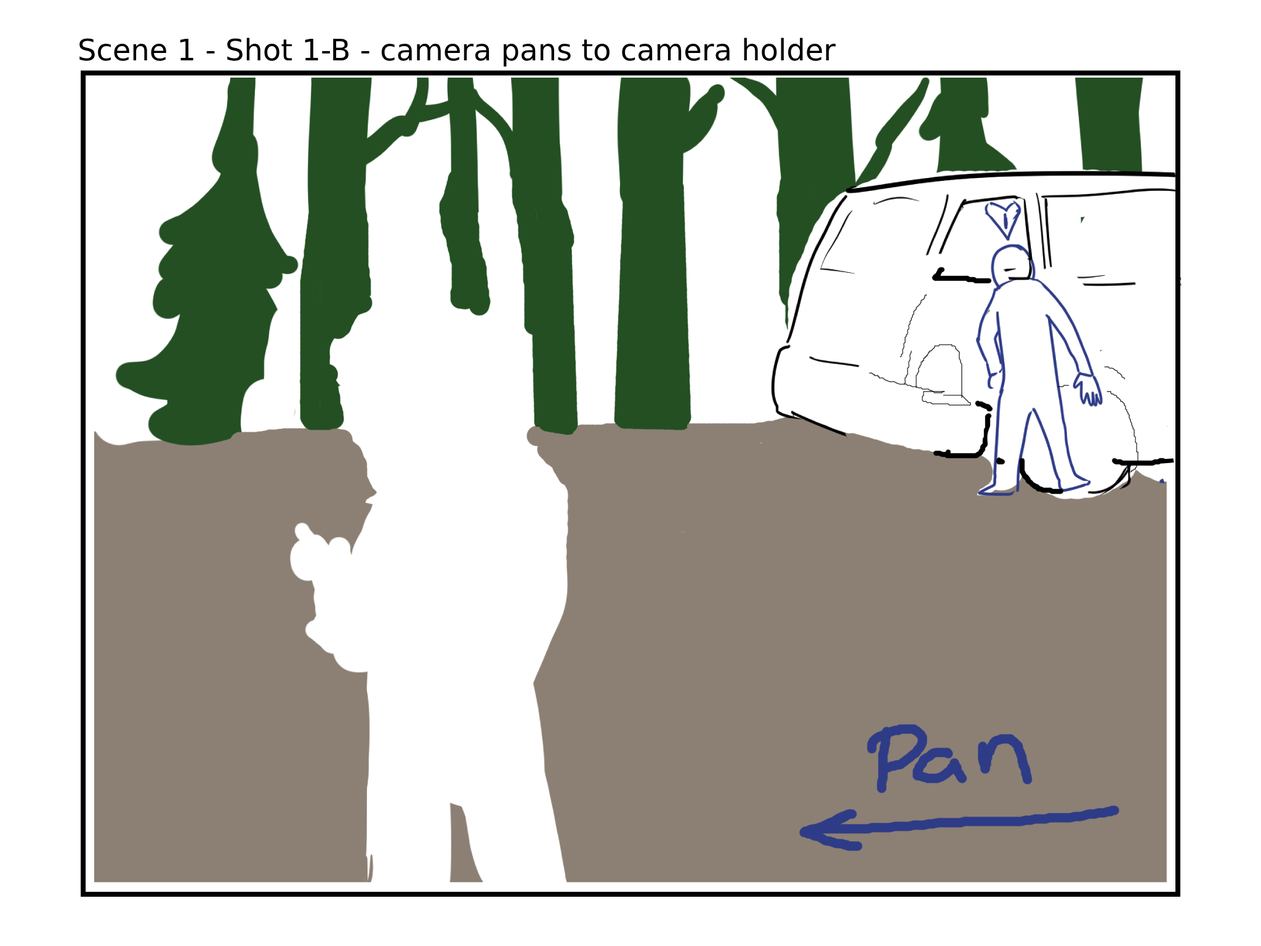
<style>
.page{position:relative;width:1261px;height:946px;background:#ffffff}
.page>*{position:absolute;margin:0}
.t1{font:29.6px "DejaVuSans";color:#000000}
.t2{font:29.6px "DejaVuSans";color:#2e3b87}
</style>
<div class="page">
<p class="t1" style="left:79px;top:38px;width:757px;height:28px">Scene 1 - Shot 1-B - camera pans to camera holde<span class="t2">r</span></p>
</div>
